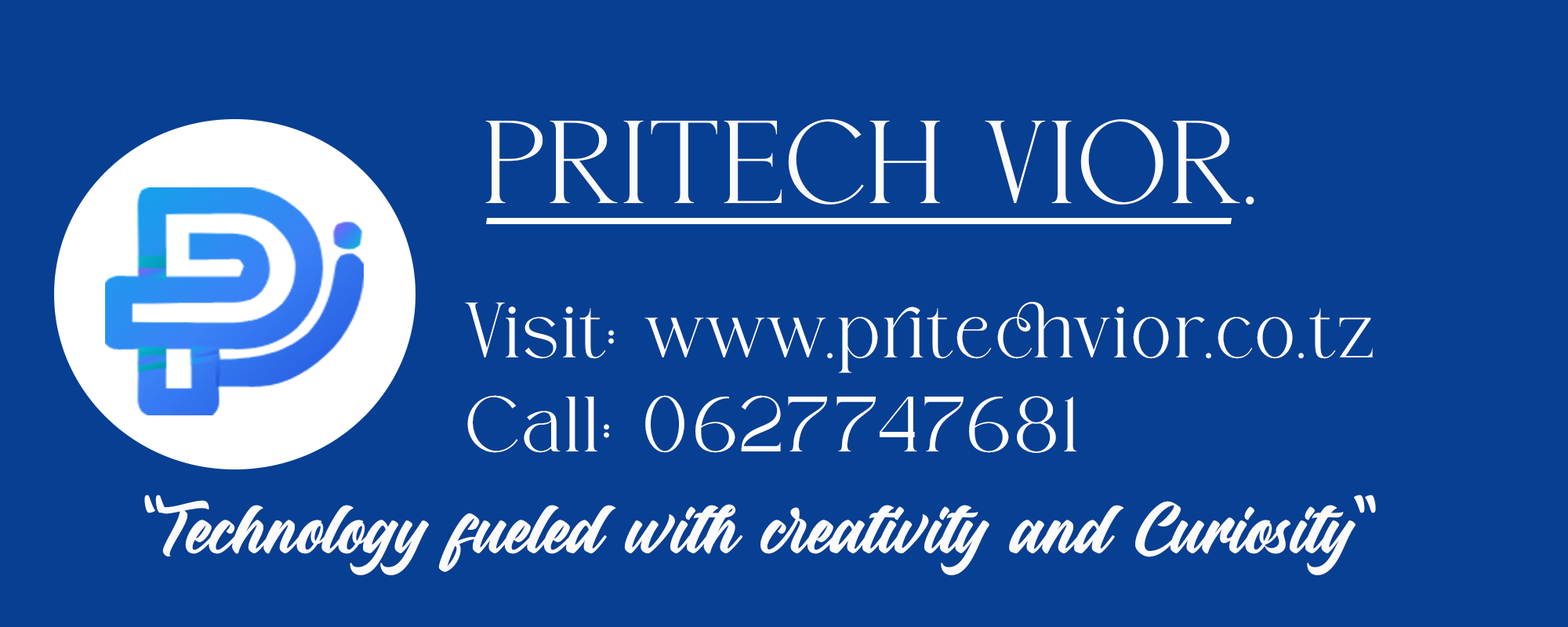
<style>
.page{position:relative;width:1568px;height:627px;background:#073f92}
.page>*{position:absolute;margin:0}
.t1{font:117.6px "BravenRegular";color:#fbfbfb}
.t2{font:78.4px "BravenRegular";color:#ffffff}
.t3{font:98px "Dirtylane";color:#fbfbfb}
</style>
<div class="page">
<p class="t1" style="left:485px;top:119px;width:769px;height:86px">PRITECH VIOR.</p>
<p class="t2" style="left:465px;top:302px;width:908px;height:151px">Visit: www.pritechvior.co.tz<br>Call: 0627747681</p>
<p class="t3" style="left:144px;top:495px;width:1232px;height:80px">“Technology fueled with creativity and Curiosity”</p>
</div>
